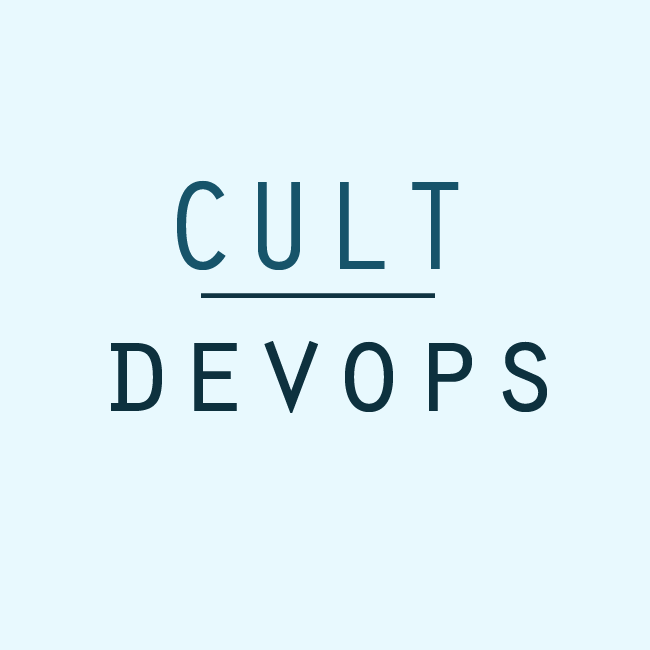
<style>
.page{position:relative;width:650px;height:650px;background:#e8f9fe}
.page>*{position:absolute;margin:0}
.t1{font:130px "OratorStd";color:#17546a}
.t2{font:130px "OratorStd";color:#0f3442}
.t3{font:130px "OratorStd";color:#0d313e}
</style>
<div class="page">
<p class="t1" style="left:177px;top:180px;width:282px;height:90px">CULT</p>
<p class="t2" style="left:201px;top:293px;width:234px;height:5px">___</p>
<p class="t3" style="left:111px;top:341px;width:436px;height:72px">devops</p>
</div>
